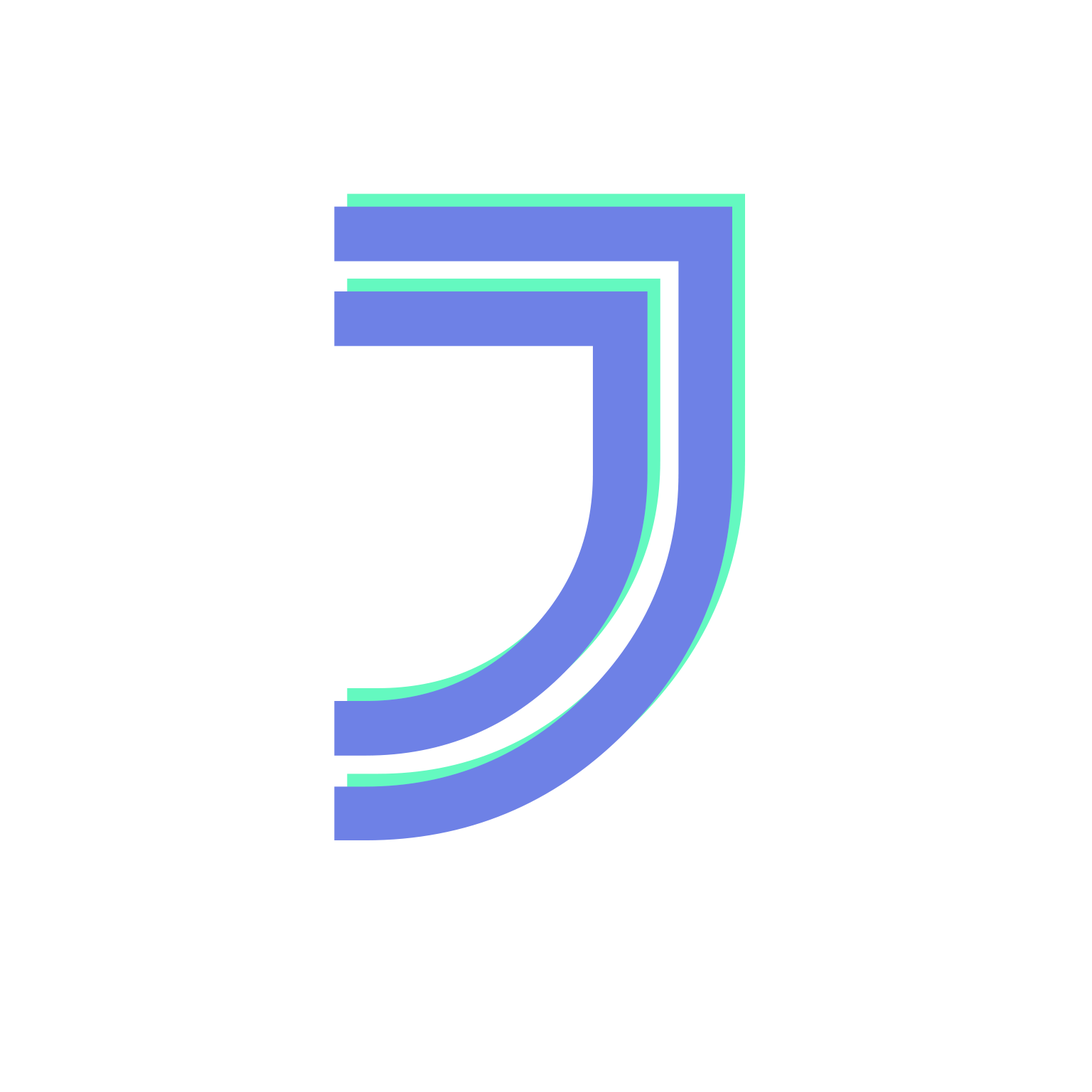
<style>
.page{position:relative;width:1092px;height:1092px;background:#ffffff}
.page>*{position:absolute;margin:0}
.t1{font:839.3px "MadisonSquareIncised";color:#6e81e6}
</style>
<div class="page">
<p class="t1" style="left:347px;top:193px;width:398px;height:635px">J</p>
<p class="t1" style="left:334px;top:206px;width:398px;height:634px">J</p>
</div>
